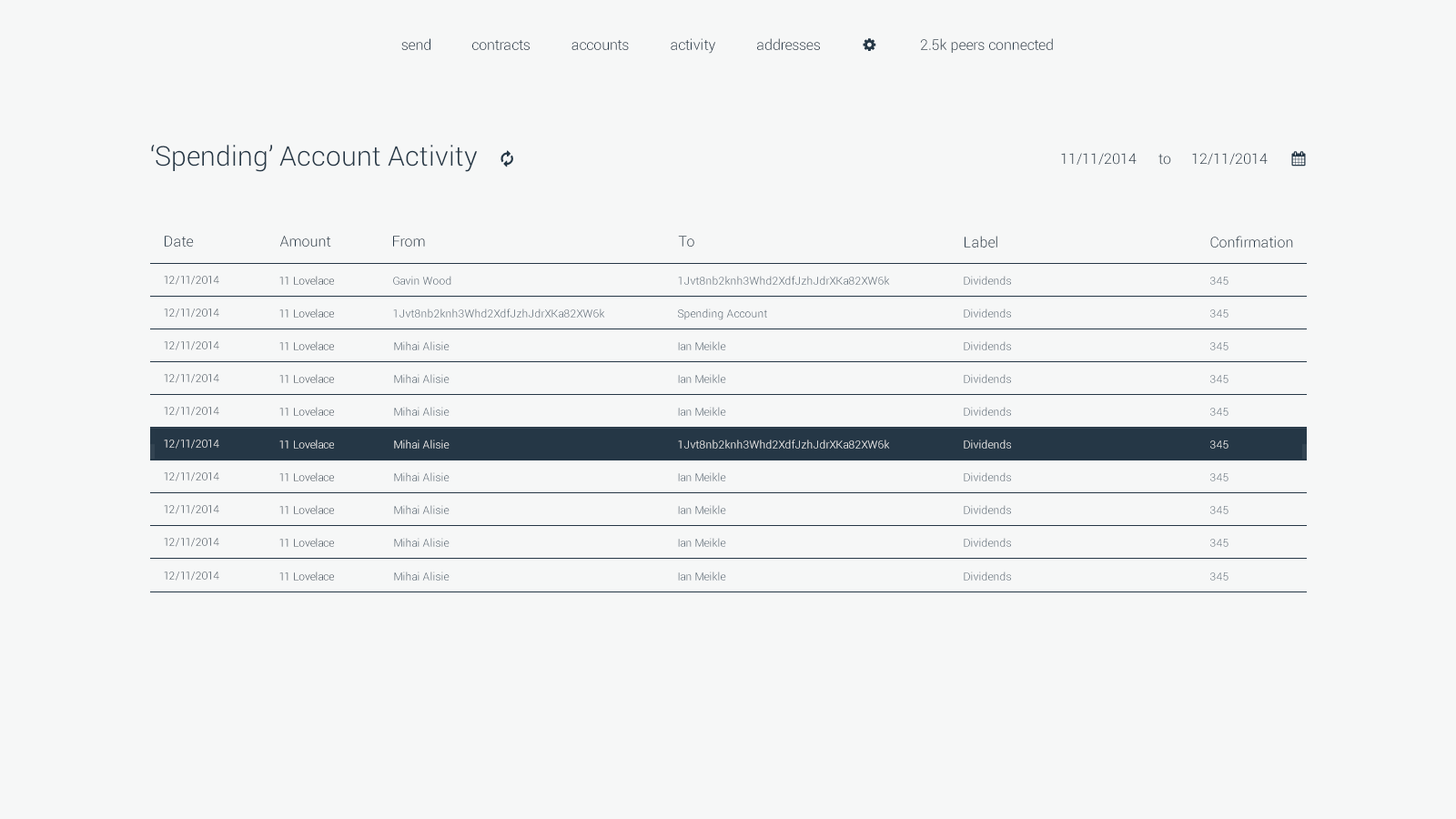
<style>
.page{position:relative;width:1456px;height:819px;background:#f6f7f7}
.page>*{position:absolute;margin:0}
.t1{font:14.6px "Roboto-Light";color:#253746}
.t2{font:27.3px "Roboto-Light";color:#253746}
.t3{font:14.6px "Roboto-Light"}
.t4{font:10.9px "Roboto-Light"}
.t5{font:10.9px "Roboto-Light";color:#ffffff}
</style>
<div class="page">
<p class="t1" style="left:401px;top:38px;width:29px;height:12px">send</p>
<p class="t1" style="left:472px;top:40px;width:58px;height:10px">contracts</p>
<p class="t1" style="left:571px;top:40px;width:58px;height:10px">accounts</p>
<p class="t1" style="left:671px;top:38px;width:44px;height:16px">activity</p>
<p class="t1" style="left:757px;top:38px;width:63px;height:12px">addresses</p>
<p class="t1" style="left:920px;top:38px;width:133px;height:15px">2.5k peers connected</p>
<p class="t2" style="left:151px;top:145px;width:327px;height:27px">‘Spending’ Account Activity</p>
<p class="t1" style="left:1061px;top:153px;width:207px;height:12px">11/11/2014 to 12/11/2014</p>
<p class="t1" style="left:165px;top:236px;width:29px;height:11px">Date</p>
<p class="t1" style="left:279px;top:236px;width:52px;height:11px">Amount</p>
<p class="t1" style="left:393px;top:236px;width:32px;height:11px">From</p>
<p class="t3" style="left:678px;top:236px;width:16px;height:11px">To</p>
<p class="t1" style="left:965px;top:236px;width:32px;height:12px">Label</p>
<p class="t1" style="left:1210px;top:236px;width:83px;height:12px">Confirmation</p>
<p class="t4" style="left:164px;top:276px;width:55px;height:9px">12/11/2014</p>
<p class="t4" style="left:279px;top:276px;width:55px;height:9px">11 Lovelace</p>
<p class="t4" style="left:393px;top:276px;width:58px;height:9px">Gavin Wood</p>
<p class="t4" style="left:678px;top:276px;width:212px;height:9px">1Jvt8nb2knh3Whd2XdfJzhJdrXKa82XW6k</p>
<p class="t4" style="left:964px;top:276px;width:47px;height:9px">Dividends</p>
<p class="t4" style="left:1210px;top:277px;width:18px;height:8px">345</p>
<p class="t4" style="left:164px;top:308px;width:55px;height:10px">12/11/2014</p>
<p class="t4" style="left:279px;top:308px;width:55px;height:10px">11 Lovelace</p>
<p class="t4" style="left:393px;top:308px;width:212px;height:10px">1Jvt8nb2knh3Whd2XdfJzhJdrXKa82XW6k</p>
<p class="t4" style="left:678px;top:308px;width:89px;height:12px">Spending Account</p>
<p class="t4" style="left:964px;top:308px;width:47px;height:10px">Dividends</p>
<p class="t4" style="left:1210px;top:309px;width:18px;height:9px">345</p>
<p class="t4" style="left:164px;top:341px;width:55px;height:9px">12/11/2014</p>
<p class="t4" style="left:279px;top:341px;width:55px;height:9px">11 Lovelace</p>
<p class="t4" style="left:394px;top:341px;width:56px;height:9px">Mihai Alisie</p>
<p class="t4" style="left:678px;top:341px;width:48px;height:9px">Ian Meikle</p>
<p class="t4" style="left:964px;top:341px;width:47px;height:9px">Dividends</p>
<p class="t4" style="left:1210px;top:342px;width:18px;height:8px">345</p>
<p class="t4" style="left:164px;top:374px;width:55px;height:9px">12/11/2014</p>
<p class="t4" style="left:279px;top:374px;width:55px;height:9px">11 Lovelace</p>
<p class="t4" style="left:394px;top:374px;width:56px;height:9px">Mihai Alisie</p>
<p class="t4" style="left:678px;top:374px;width:48px;height:9px">Ian Meikle</p>
<p class="t4" style="left:964px;top:374px;width:47px;height:9px">Dividends</p>
<p class="t4" style="left:1210px;top:375px;width:18px;height:8px">345</p>
<p class="t4" style="left:164px;top:407px;width:55px;height:9px">12/11/2014</p>
<p class="t4" style="left:279px;top:407px;width:55px;height:9px">11 Lovelace</p>
<p class="t4" style="left:394px;top:407px;width:56px;height:9px">Mihai Alisie</p>
<p class="t4" style="left:678px;top:407px;width:48px;height:9px">Ian Meikle</p>
<p class="t4" style="left:964px;top:407px;width:47px;height:9px">Dividends</p>
<p class="t4" style="left:1210px;top:408px;width:18px;height:8px">345</p>
<p class="t4" style="left:164px;top:440px;width:55px;height:9px">12/11/2014</p>
<p class="t5" style="left:279px;top:440px;width:55px;height:9px">11 Lovelace</p>
<p class="t5" style="left:394px;top:440px;width:56px;height:9px">Mihai Alisie</p>
<p class="t4" style="left:678px;top:440px;width:212px;height:9px">1Jvt8nb2knh3Whd2XdfJzhJdrXKa82XW6k</p>
<p class="t5" style="left:964px;top:440px;width:47px;height:9px">Dividends</p>
<p class="t4" style="left:1210px;top:440px;width:18px;height:9px">345</p>
<p class="t4" style="left:164px;top:472px;width:55px;height:9px">12/11/2014</p>
<p class="t4" style="left:279px;top:472px;width:55px;height:9px">11 Lovelace</p>
<p class="t4" style="left:394px;top:472px;width:56px;height:9px">Mihai Alisie</p>
<p class="t4" style="left:678px;top:472px;width:48px;height:9px">Ian Meikle</p>
<p class="t4" style="left:964px;top:472px;width:47px;height:9px">Dividends</p>
<p class="t4" style="left:1210px;top:473px;width:18px;height:8px">345</p>
<p class="t4" style="left:164px;top:505px;width:55px;height:9px">12/11/2014</p>
<p class="t4" style="left:279px;top:505px;width:55px;height:9px">11 Lovelace</p>
<p class="t4" style="left:394px;top:505px;width:56px;height:9px">Mihai Alisie</p>
<p class="t4" style="left:678px;top:505px;width:48px;height:9px">Ian Meikle</p>
<p class="t4" style="left:964px;top:505px;width:47px;height:9px">Dividends</p>
<p class="t4" style="left:1210px;top:506px;width:18px;height:8px">345</p>
<p class="t4" style="left:164px;top:538px;width:55px;height:9px">12/11/2014</p>
<p class="t4" style="left:279px;top:538px;width:55px;height:9px">11 Lovelace</p>
<p class="t4" style="left:394px;top:538px;width:56px;height:9px">Mihai Alisie</p>
<p class="t4" style="left:678px;top:538px;width:48px;height:9px">Ian Meikle</p>
<p class="t4" style="left:964px;top:538px;width:47px;height:9px">Dividends</p>
<p class="t4" style="left:1210px;top:539px;width:18px;height:8px">345</p>
<p class="t4" style="left:164px;top:571px;width:55px;height:10px">12/11/2014</p>
<p class="t4" style="left:279px;top:571px;width:55px;height:10px">11 Lovelace</p>
<p class="t4" style="left:394px;top:571px;width:56px;height:10px">Mihai Alisie</p>
<p class="t4" style="left:678px;top:571px;width:48px;height:10px">Ian Meikle</p>
<p class="t4" style="left:964px;top:571px;width:47px;height:10px">Dividends</p>
<p class="t4" style="left:1210px;top:572px;width:18px;height:9px">345</p>
</div>
